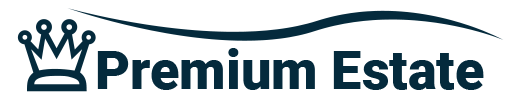
<style>
.page{position:relative;width:512px;height:103px;background:#ffffff}
.page>*{position:absolute;margin:0}
.t1{font:54.2px "Roboto-Black";color:#042a3c}
</style>
<div class="page">
<p class="t1" style="left:97px;top:48px;width:387px;height:42px">Premium Estate</p>
</div>
